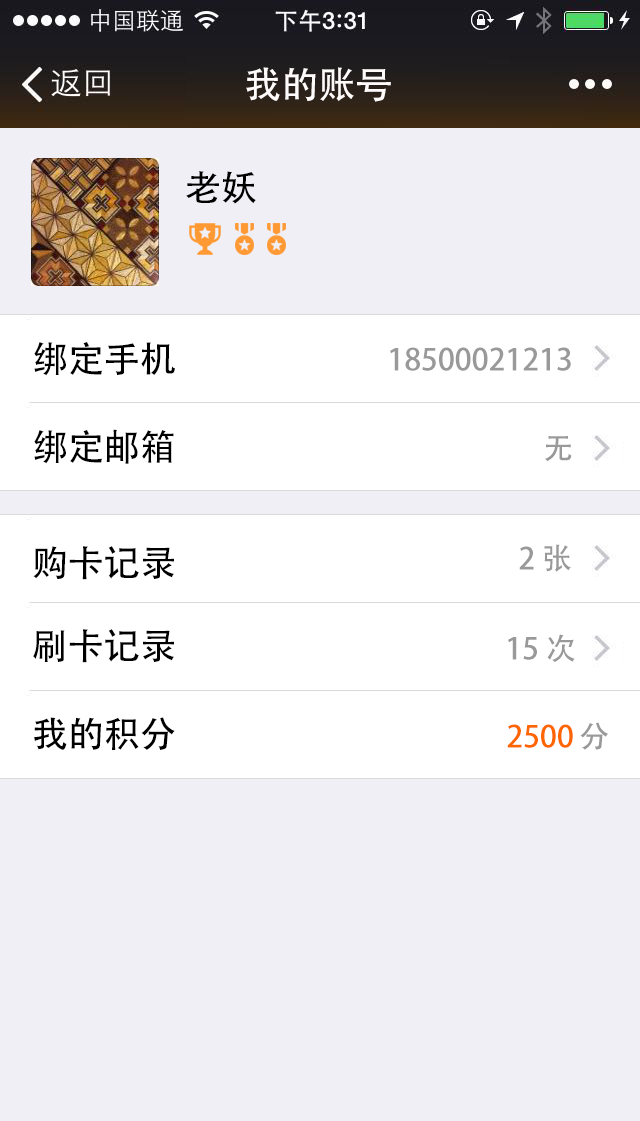
<style>
.page{position:relative;width:640px;height:1121px;background:#f0eff5}
.page>*{position:absolute;margin:0}
.t1{font:37.1px "AdobeHeitiStd-Regular";color:#fffbfa}
.t2{font:36px "AdobeHeitiStd-Regular";color:#000000}
.t3{font:30px "AdobeHeitiStd-Regular";color:#999999}
.t4{font:30px "AdobeHeitiStd-Regular";color:#ff6600}
</style>
<div class="page">
<p class="t1" style="left:246px;top:67px;width:145px;height:35px">我的账号</p>
<p class="t2" style="left:186px;top:171px;width:70px;height:33px">老妖</p>
<p class="t2" style="left:34px;top:342px;width:141px;height:34px">绑定手机</p>
<p class="t3" style="left:390px;top:347px;width:181px;height:24px">18500021213</p>
<p class="t2" style="left:34px;top:429px;width:140px;height:35px">绑定邮箱</p>
<p class="t3" style="left:545px;top:436px;width:27px;height:26px">无</p>
<p class="t3" style="left:519px;top:544px;width:52px;height:28px">2 张</p>
<p class="t2" style="left:33px;top:546px;width:141px;height:34px">购卡记录</p>
<p class="t2" style="left:33px;top:629px;width:141px;height:34px">刷卡记录</p>
<p class="t3" style="left:508px;top:634px;width:67px;height:28px">15 次</p>
<p class="t2" style="left:33px;top:717px;width:142px;height:33px">我的积分</p>
<p class="t4" style="left:507px;top:724px;width:66px;height:24px">2500</p>
<p class="t3" style="left:580px;top:722px;width:28px;height:28px">分</p>
</div>
